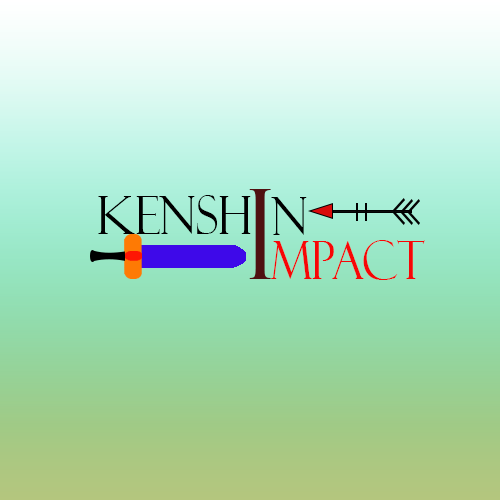
<style>
.page{position:relative;width:500px;height:500px}
.page>*{position:absolute;margin:0}
.t1{font:53px "FelixTitlingMT";color:#000000;scale:0.87 1}
.t2{font:125.1px "FelixTitlingMT";color:#4f1111;scale:0.87 1}
.t3{font:53px "FelixTitlingMT";color:#f70606;scale:0.87 1}
</style>
<div class="page">
<p class="t1" style="left:98px;top:195px;width:153px;height:39px">Kensh</p>
<p class="t2" style="left:249px;top:189px;width:22px;height:90px">I</p>
<p class="t1" style="left:271px;top:197px;width:36px;height:38px">N</p>
<p class="t3" style="left:271px;top:240px;width:154px;height:40px">mpact</p>
</div>
